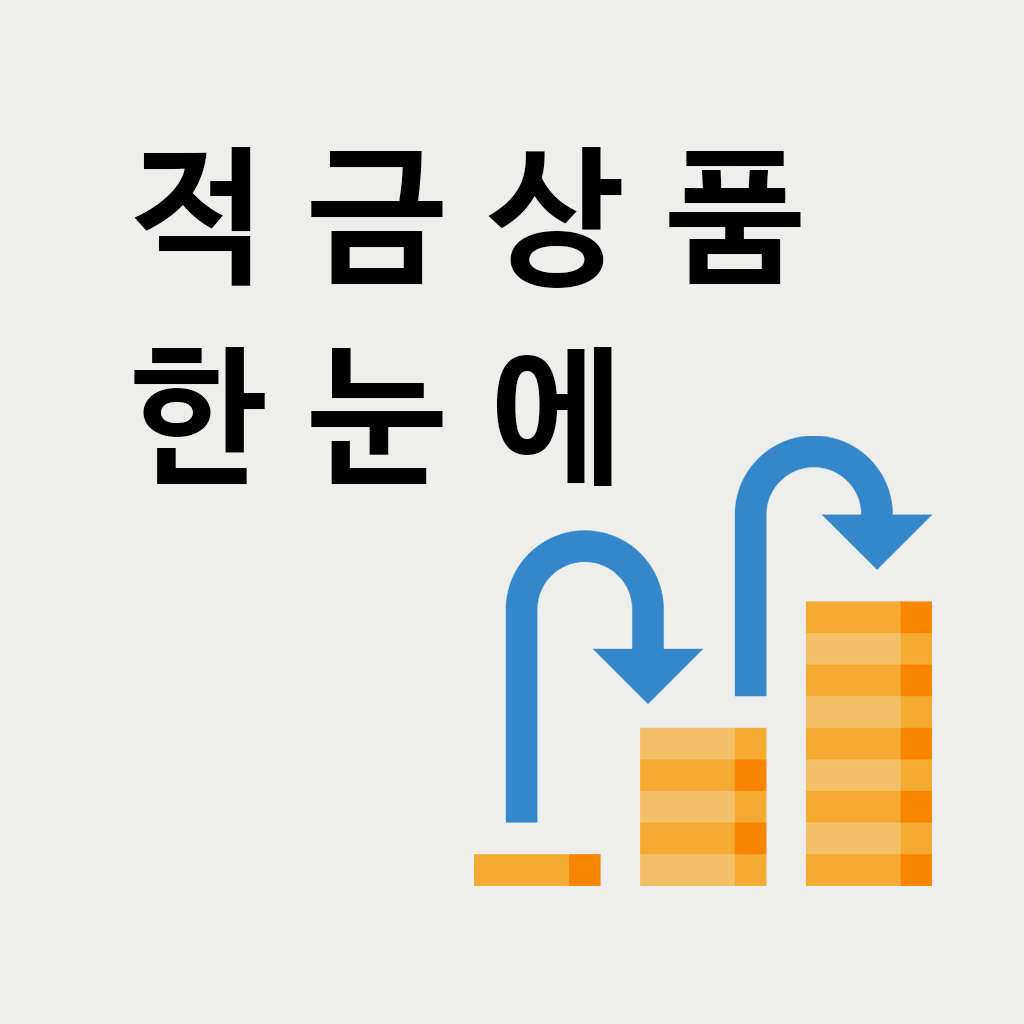
<style>
.page{position:relative;width:1024px;height:1024px;background:#eeeeec}
.page>*{position:absolute;margin:0}
.t1{font:150px/200px "NanumBarunGothicBold";letter-spacing:0.3em;color:#000000}
</style>
<div class="page">
<p class="t1" style="left:134px;top:147px;width:667px;height:339px">적금상품<br>한눈에</p>
</div>
